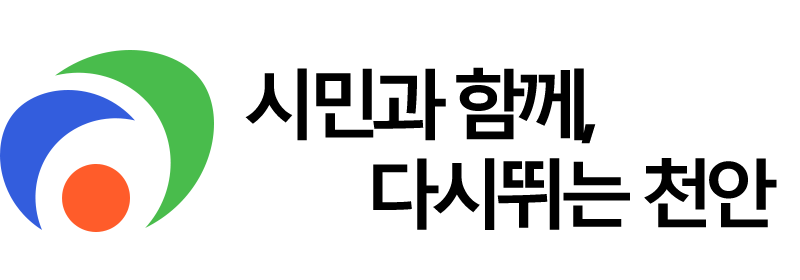
<style>
.page{position:relative;width:800px;height:280px;background:#ffffff}
.page>*{position:absolute;margin:0}
.t1{font:76px "MalgunGothicBold";letter-spacing:-0.15em;color:#000000}
</style>
<div class="page">
<p class="t1" style="left:245px;top:67px;width:351px;height:77px">시민과 함께,</p>
<p class="t1" style="left:373px;top:158px;width:404px;height:72px">다시뛰는 천안</p>
</div>
